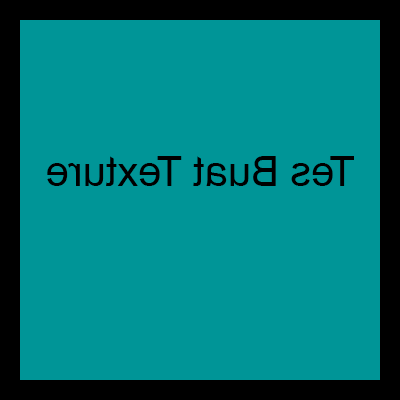
<style>
.page{position:relative;width:400px;height:400px;background:#009597}
.page>*{position:absolute;margin:0}
.t1{font:41.7px "ArialMT";color:#000000}
</style>
<div class="page">
<p class="t1" style="left:47px;top:156px;width:307px;height:30px;rotate:180deg">Tes Buat Texture</p>
</div>
